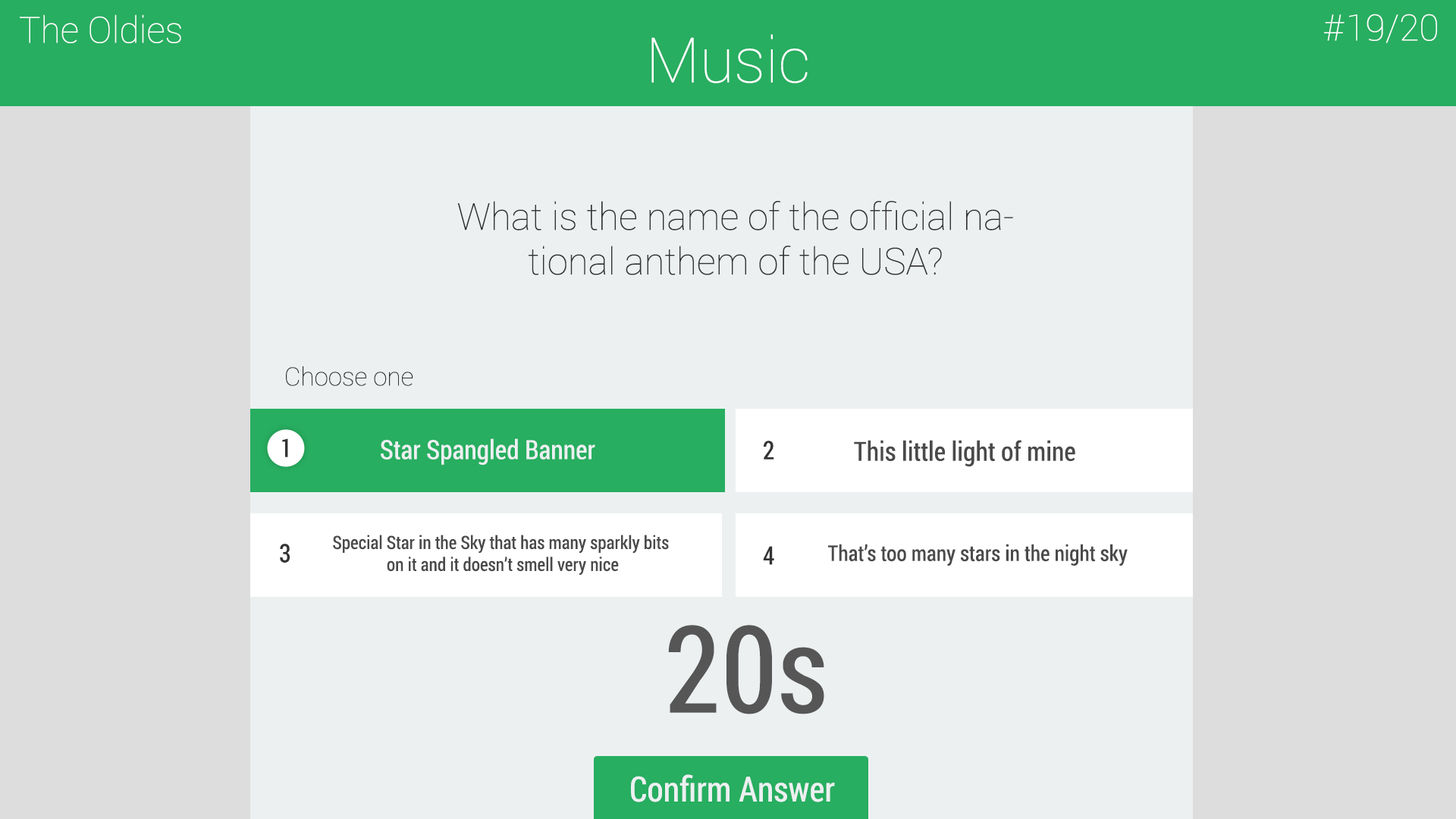
<style>
.page{position:relative;width:1456px;height:819px;background:#ecf0f1}
.page>*{position:absolute;margin:0}
.t1{font:36.4px "Roboto-Thin";color:#fefefe}
.t2{font:62.6px "Roboto-Thin";color:#fefefe}
.t3{font:37.2px "Roboto-Thin";color:#333333}
.t4{font:25.2px "Roboto-Thin";color:#333333}
.t5{font:25.5px "RobotoCondensed-Regular";color:#333333}
.t6{font:26.5px "RobotoCondensed-Regular";color:#ecf0f1}
.t7{font:26.5px "RobotoCondensed-Regular";color:#4a4a4a}
.t8{font:18.3px "RobotoCondensed-Regular";color:#4a4a4a}
.t9{font:21.7px "RobotoCondensed-Regular";color:#4a4a4a}
.t10{font:121.2px "RobotoCondensed-Regular";color:#565656}
.t11{font:34.6px "RobotoCondensed-Regular";color:#ecf0f1}
</style>
<div class="page">
<p class="t1" style="left:20px;top:14px;width:161px;height:29px">The Oldies</p>
<p class="t1" style="left:1324px;top:14px;width:113px;height:29px">#19/20</p>
<p class="t2" style="left:651px;top:34px;width:157px;height:49px">Music</p>
<p class="t3" style="left:457px;top:201px;width:556px;height:74px;text-align:center">What is the name of the official national anthem of the USA?</p>
<p class="t4" style="left:286px;top:366px;width:127px;height:20px">Choose one</p>
<p class="t5" style="left:282px;top:438px;width:6px;height:19px">1</p>
<p class="t6" style="left:381px;top:438px;width:214px;height:27px">Star Spangled Banner</p>
<p class="t5" style="left:764px;top:441px;width:10px;height:19px">2</p>
<p class="t7" style="left:854px;top:440px;width:221px;height:27px">This little light of mine</p>
<p class="t5" style="left:280px;top:544px;width:10px;height:19px">3</p>
<p class="t8" style="left:333px;top:535px;width:336px;height:40px;text-align:center">Special Star in the Sky that has many sparkly bits <br>on it and it doesn’t smell very nice</p>
<p class="t5" style="left:763px;top:546px;width:11px;height:19px">4</p>
<p class="t9" style="left:828px;top:544px;width:300px;height:22px">That’s too many stars in the night sky</p>
<p class="t10" style="left:668px;top:625px;width:156px;height:89px">20s</p>
<p class="t11" style="left:631px;top:774px;width:204px;height:28px">Confirm Answer</p>
</div>
